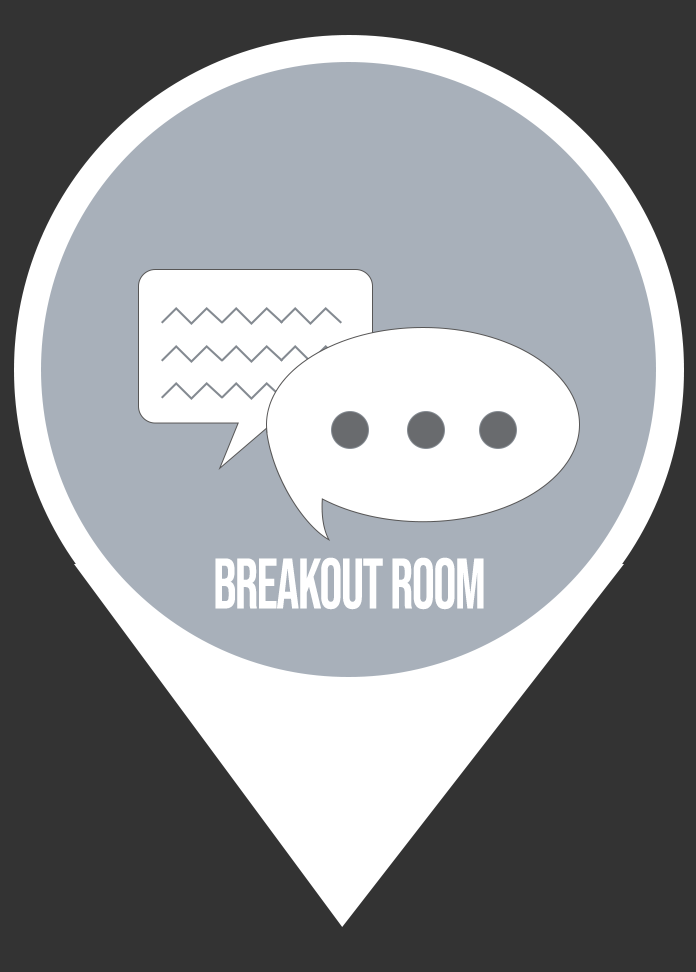
<style>
.page{position:relative;width:696px;height:972px;background:#333333}
.page>*{position:absolute;margin:0}
.t1{font:71.1px "BebasNeue-Regular";letter-spacing:-0.02em;color:#ffffff;scale:0.8 1}
</style>
<div class="page">
<p class="t1" style="left:215px;top:557px;width:269px;height:53px">Breakout room</p>
</div>
